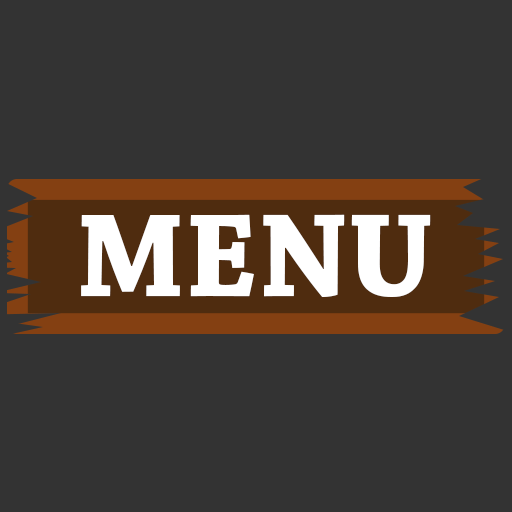
<style>
.page{position:relative;width:512px;height:512px;background:#333333}
.page>*{position:absolute;margin:0}
.t1{font:125px "ChaparralPro-Bold";color:#ffffff}
</style>
<div class="page">
<p class="t1" style="left:81px;top:214px;width:350px;height:83px">MENU</p>
</div>
